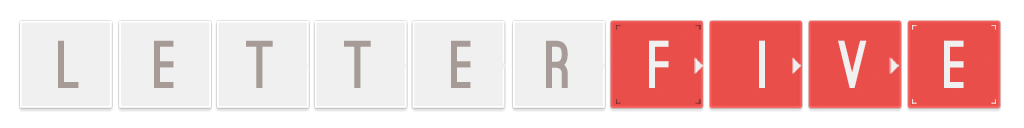
<style>
.page{position:relative;width:1024px;height:128px;background:#ffffff}
.page>*{position:absolute;margin:0}
.t1{font:64.1px "OstrichSans-Black";letter-spacing:-0.075em;color:#a79b97}
.t2{font:64.1px "OstrichSans-Black";letter-spacing:-0.075em;color:#f0f0f0}
</style>
<div class="page">
<p class="t1" style="left:58px;top:40px;width:21px;height:48px">L</p>
<p class="t1" style="left:154px;top:40px;width:20px;height:48px">e</p>
<p class="t1" style="left:246px;top:40px;width:27px;height:48px">T</p>
<p class="t1" style="left:344px;top:40px;width:27px;height:48px">T</p>
<p class="t1" style="left:451px;top:40px;width:20px;height:48px">E</p>
<p class="t1" style="left:546px;top:40px;width:22px;height:48px">R</p>
<p class="t2" style="left:649px;top:40px;width:20px;height:48px">F</p>
<p class="t2" style="left:759px;top:40px;width:6px;height:48px">I</p>
<p class="t2" style="left:838px;top:40px;width:29px;height:48px">V</p>
<p class="t2" style="left:944px;top:40px;width:20px;height:48px">e</p>
</div>
